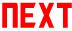
<style>
.page{position:relative;width:72px;height:31px;background:#ffffff}
.page>*{position:absolute;margin:0}
.t1{font:36px "MegatronCondensed";color:#fe0000}
</style>
<div class="page">
<p class="t1" style="left:2px;top:2px;width:70px;height:26px">next</p>
</div>
